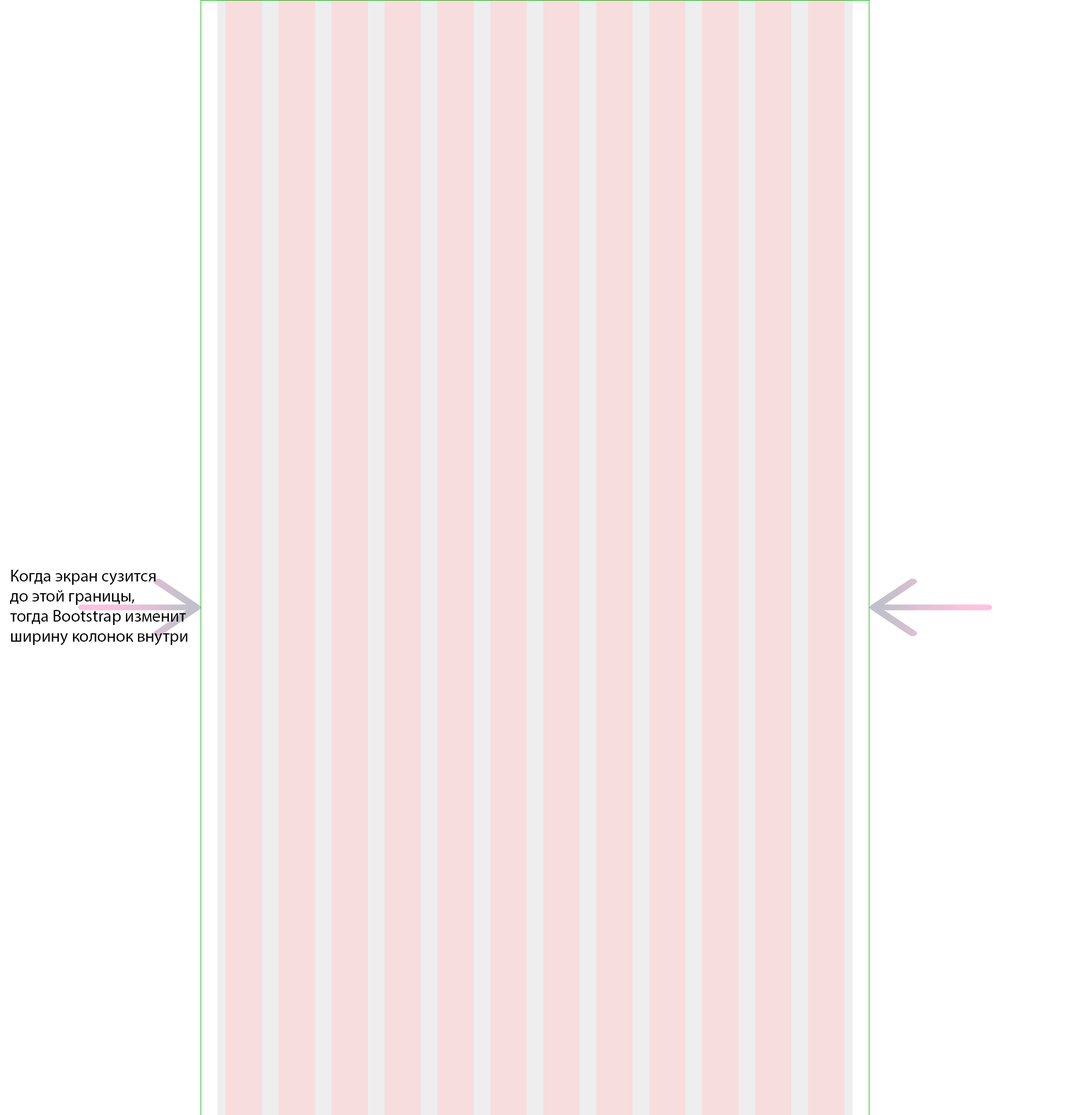
<style>
.page{position:relative;width:1070px;height:1115px;background:#ffffff}
.page>*{position:absolute;margin:0}
.t1{font:16.7px "MyriadPro-Regular";color:#000000}
</style>
<div class="page">
<p class="t1" style="left:10px;top:570px;width:177px;height:75px">Когда экран сузится<br>до этой границы, <br>тогда Bootstrap изменит<br>ширину колонок внутри</p>
</div>
